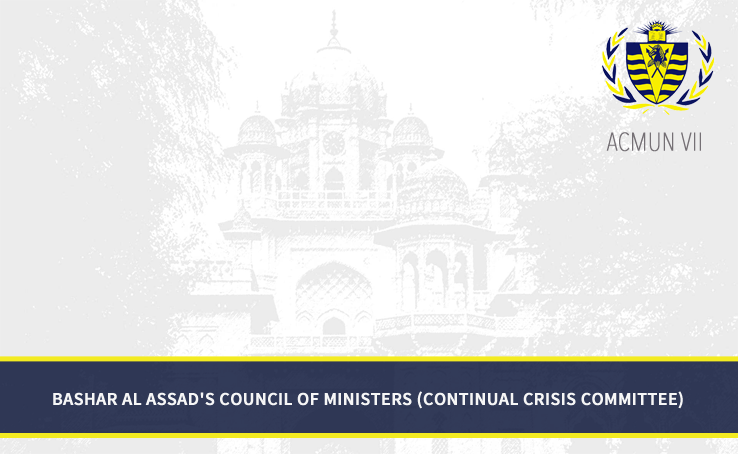
<style>
.page{position:relative;width:738px;height:454px;background:#ececec}
.page>*{position:absolute;margin:0}
.t1{font:25px "AvenirNextCondensed-UltraLight";color:#757075;text-transform:uppercase;font-weight:bold}
.t2{font:18px "SourceSansPro-Semibold";color:#f5f5f5;text-transform:uppercase;font-weight:bold}
</style>
<div class="page">
<p class="t1" style="left:606px;top:132px;width:95px;height:20px">ACMUN VII</p>
<p class="t2" style="left:53px;top:391px;width:630px;height:18px">BASHAR AL ASSAD'S COUNCIL OF MINISTERS (CONTINUAL CRISIS COMMITTEE)</p>
</div>
